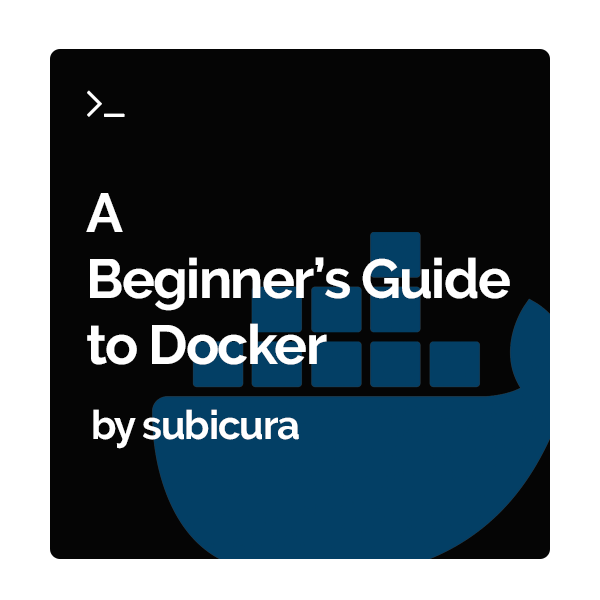
<style>
.page{position:relative;width:600px;height:600px;background:#050505}
.page>*{position:absolute;margin:0}
.t1{font:55px "Raleway-Bold";letter-spacing:-0.03em;color:#ffffff}
.t2{font:40px "Raleway-Bold";letter-spacing:-0.03em;color:#ffffff}
</style>
<div class="page">
<p class="t1" style="left:86px;top:193px;width:424px;height:172px">A<br>Beginner’s Guide<br>to Docker</p>
<p class="t2" style="left:93px;top:409px;width:206px;height:40px">by subicura</p>
</div>
